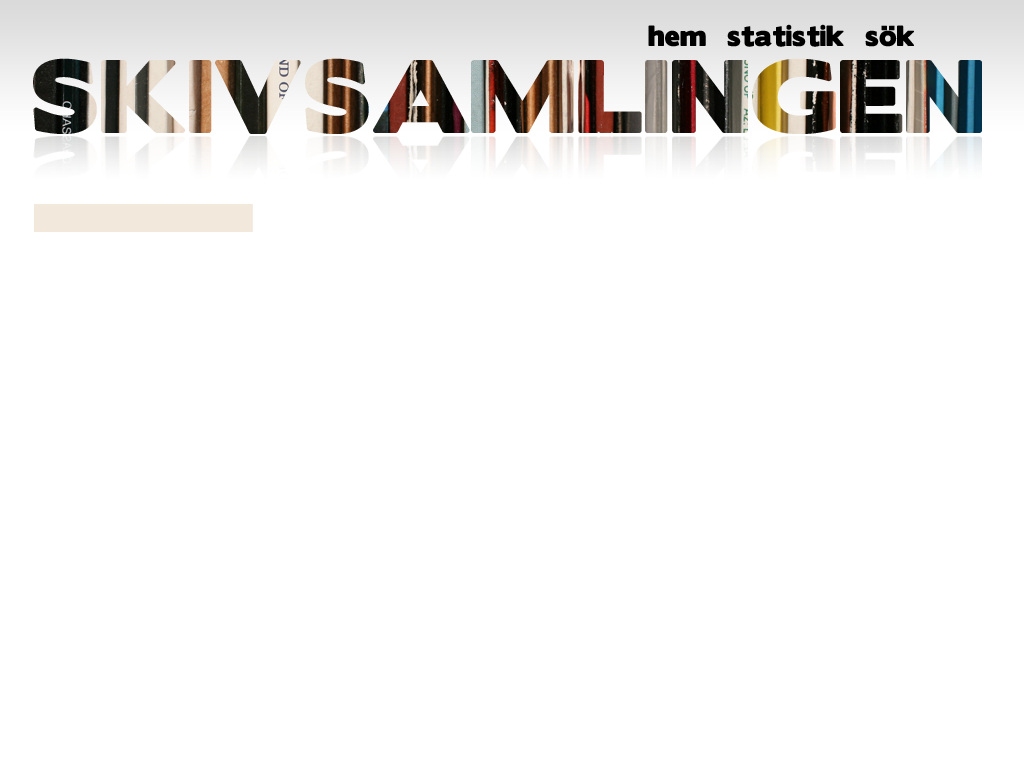
<style>
.page{position:relative;width:1024px;height:768px;background:#ffffff}
.page>*{position:absolute;margin:0}
.t1{font:26px "BorisBlackBloxx";color:#000000}
</style>
<div class="page">
<p class="t1" style="left:648px;top:24px;width:266px;height:23px">hem   statistik   sök</p>
</div>
